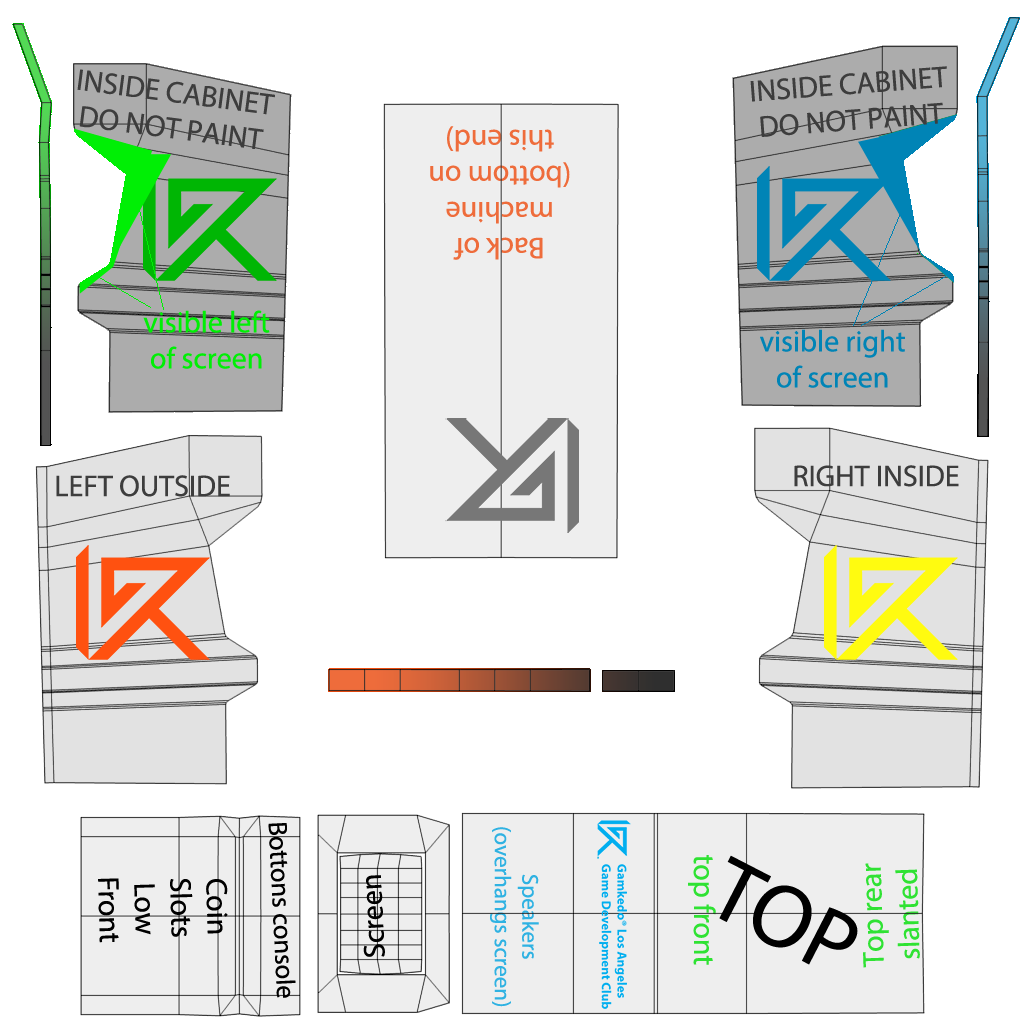
<style>
.page{position:relative;width:1024px;height:1024px;background:#ffffff}
.page>*{position:absolute;margin:0}
.t1{font:30px/36px "MyriadPro-Regular";color:#3d3d3d}
.t2{font:30px/36px "MyriadPro-Regular";color:#ee6c3b}
.t3{font:30px/36px "MyriadPro-Regular";color:#00ef05}
.t4{font:30px/36px "MyriadPro-Regular";color:#0084b6}
.t5{font:30px "MyriadPro-Regular";color:#3d3d3d}
.t6{font:26.5px "MyriadPro-Regular";color:#000000}
.t7{font:22.9px/27.5px "MyriadPro-Regular";color:#2fb2e2}
.t8{font:30px "MyriadPro-Regular";color:#2fe233}
.t9{font:90px "MyriadPro-Regular";color:#000000}
.t10{font:30px/36px "MyriadPro-Regular";color:#2fe233}
.t11{font:30px/36px "MyriadPro-Regular";color:#000000}
.t12{font:30px "MyriadPro-Regular";color:#000000}
</style>
<div class="page">
<p class="t1" style="left:77px;top:69px;width:198px;height:80px;text-align:center;rotate:7deg">INSIDE CABINET<br>DO NOT PAINT</p>
<p class="t1" style="left:750px;top:66px;width:197px;height:71px;text-align:center;rotate:-4deg">INSIDE CABINET<br>DO NOT PAINT</p>
<p class="t2" style="left:430px;top:126px;width:140px;height:134px;text-align:center;rotate:180deg">Back of<br>machine<br>(bottom on<br>this end)</p>
<p class="t3" style="left:143px;top:310px;width:127px;height:59px;text-align:center">visible left<br>of screen</p>
<p class="t4" style="left:760px;top:329px;width:145px;height:59px;text-align:center">visible right<br>of screen</p>
<p class="t5" style="left:794px;top:465px;width:165px;height:22px">RIGHT INSIDE</p>
<p class="t5" style="left:56px;top:475px;width:174px;height:22px">LEFT OUTSIDE</p>
<p class="t6" style="left:268px;top:823px;width:28px;height:175px;rotate:87deg">Bottons console</p>
<p class="t7" style="left:490px;top:827px;width:49px;height:180px;text-align:center;rotate:90deg">Speakers<br>(overhangs screen)</p>
<p class="t8" style="left:688px;top:855px;width:28px;height:110px;rotate:90deg">top front</p>
<p class="t9" style="left:719px;top:855px;width:139px;height:110px;rotate:27deg">TOP</p>
<p class="t10" style="left:863px;top:863px;width:57px;height:105px;text-align:center;rotate:-92deg">Top rear<br>slanted</p>
<p class="t11" style="left:98px;top:878px;width:130px;height:65px;text-align:center;rotate:88deg">Coin<br>Slots<br>Low<br>Front</p>
<p class="t12" style="left:363px;top:875px;width:22px;height:82px;rotate:-93deg">Screen</p>
</div>
